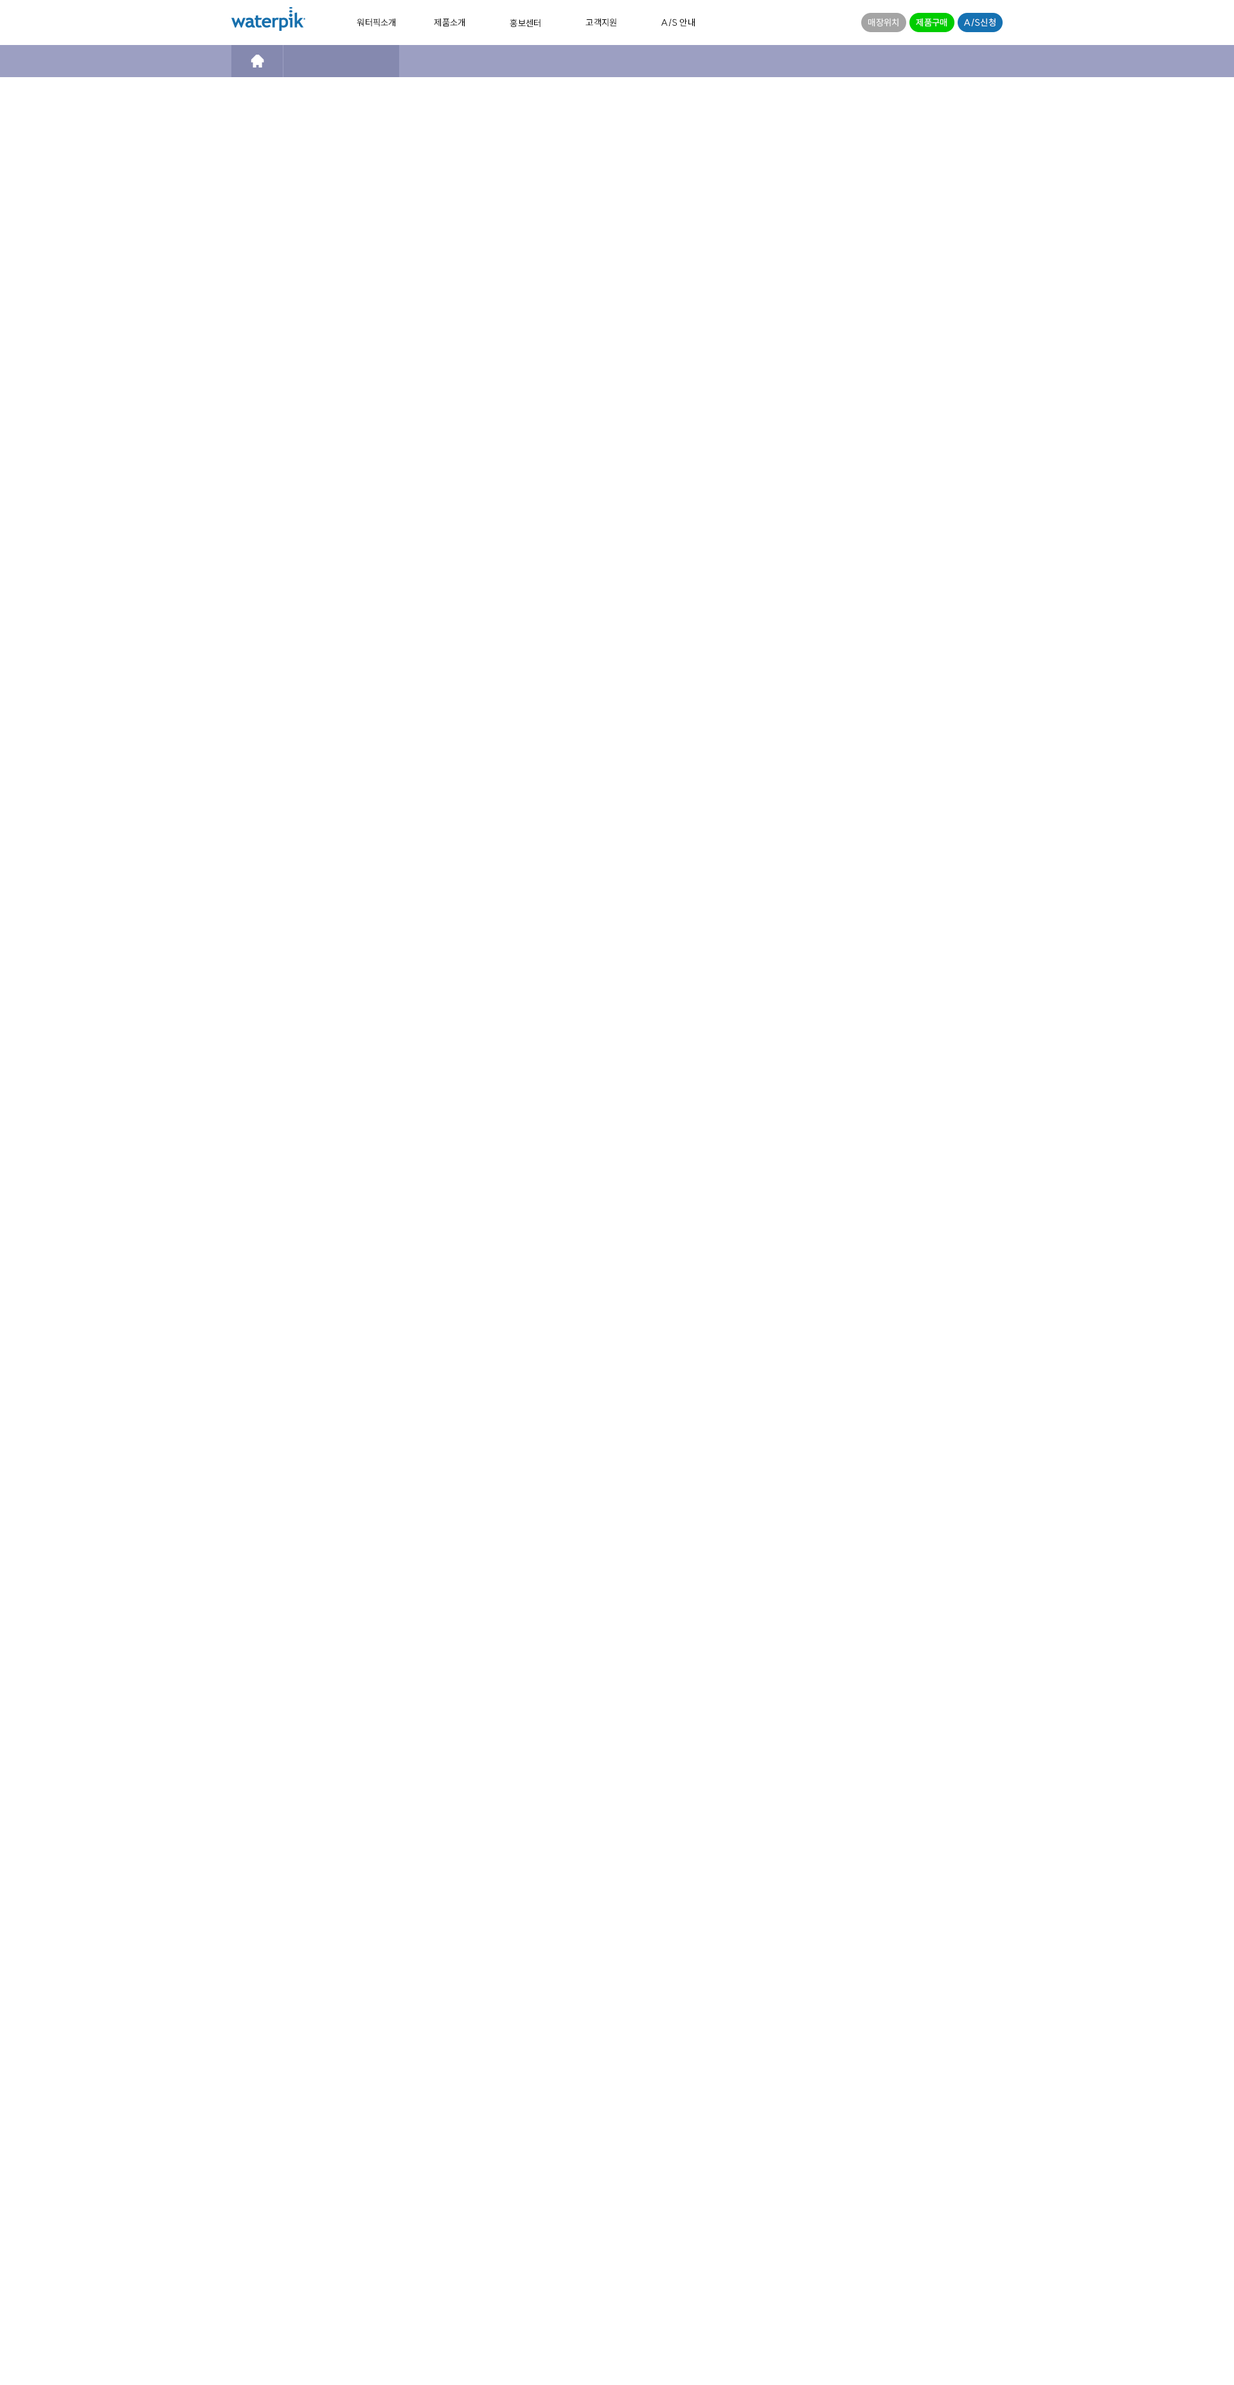
<style>
.page{position:relative;width:1234px;height:2385px;background:#ffffff}
.page>*{position:absolute;margin:0}
.t1{font:9px "SUIT-Regular";color:#000000}
.t2{font:9px "SUIT-Regular";color:#ffffff}
</style>
<div class="page">
<p class="t1" style="left:357px;top:18px;width:38px;height:9px">워터픽소개</p>
<p class="t1" style="left:434px;top:18px;width:31px;height:9px">제품소개</p>
<p class="t1" style="left:510px;top:19px;width:31px;height:9px">홍보센터</p>
<p class="t1" style="left:586px;top:18px;width:30px;height:9px">고객지원</p>
<p class="t1" style="left:662px;top:18px;width:33px;height:9px">A/S 안내</p>
<p class="t2" style="left:868px;top:18px;width:31px;height:9px">매장위치</p>
<p class="t2" style="left:916px;top:18px;width:32px;height:9px">제품구매</p>
<p class="t2" style="left:964px;top:18px;width:32px;height:9px">A/S신청</p>
</div>
